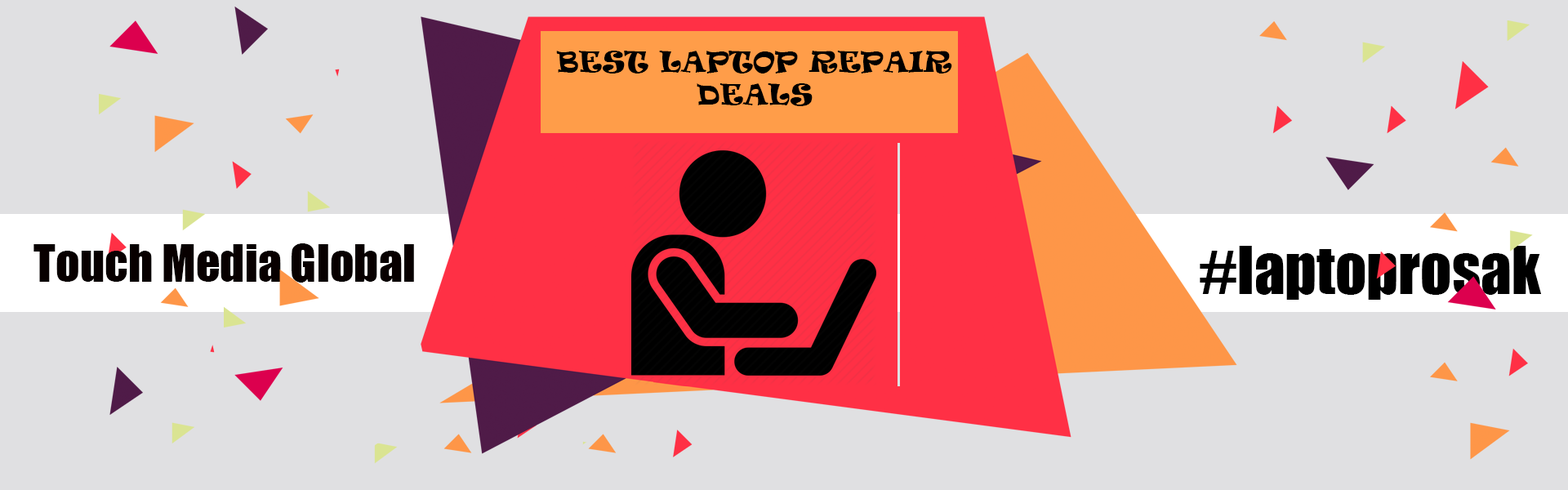
<style>
.page{position:relative;width:1568px;height:490px;background:#e0e0e2}
.page>*{position:absolute;margin:0}
.t1{font:27.2px "Ravie";color:#000000}
.t2{font:47.6px "Impact";color:#080000}
.t3{font:61.2px "Impact";color:#000000}
</style>
<div class="page">
<p class="t1" style="left:556px;top:51px;width:396px;height:55px;text-align:center">BEST LAPTOP REPAIR<br>DEALS</p>
<p class="t2" style="left:33px;top:243px;width:381px;height:40px">Touch Media Global</p>
<p class="t3" style="left:1200px;top:246px;width:341px;height:54px">laptoprosak#</p>
</div>
